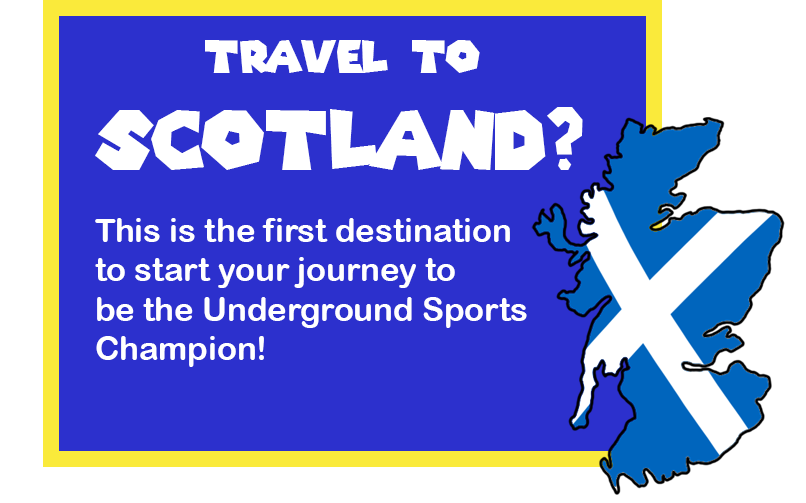
<style>
.page{position:relative;width:806px;height:503px;background:#2c30cd}
.page>*{position:absolute;margin:0}
.t1{font:43.6px "SuperMarioGalaxy";color:#ffffff}
.t2{font:81.1px "SuperMarioGalaxy";color:#ffffff}
.t3{font:32.8px "ArialRoundedMTBold";color:#ffffff}
</style>
<div class="page">
<p class="t1" style="left:95px;top:40px;width:488px;height:130px;text-align:center">Travel to <br><span class="t2">Scotland?</span></p>
<p class="t3" style="left:95px;top:218px;width:432px;height:149px">This is the first destination <br>to start your journey to <br>be the Underground Sports <br>Champion!</p>
</div>
